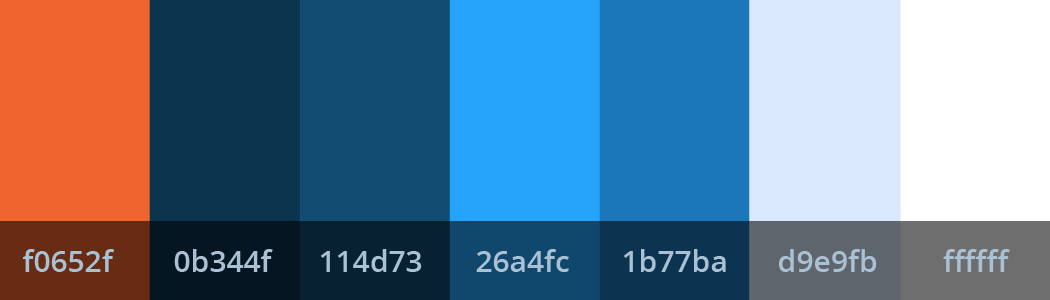
<style>
.page{position:relative;width:1050px;height:300px}
.page>*{position:absolute;margin:0}
.t1{font:30px "OpenSans-Semibold";color:#aac0d3}
</style>
<div class="page">
<p class="t1" style="left:23px;top:249px;width:92px;height:23px">f0652f</p>
<p class="t1" style="left:174px;top:249px;width:99px;height:23px">0b344f</p>
<p class="t1" style="left:320px;top:249px;width:102px;height:23px">114d73</p>
<p class="t1" style="left:476px;top:249px;width:93px;height:23px">26a4fc</p>
<p class="t1" style="left:623px;top:249px;width:103px;height:23px">1b77ba</p>
<p class="t1" style="left:779px;top:249px;width:98px;height:23px">d9e9fb</p>
<p class="t1" style="left:943px;top:249px;width:67px;height:23px">ffffff</p>
</div>
